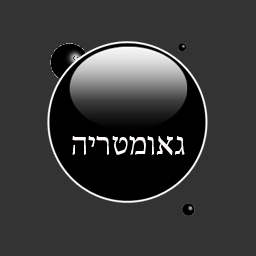
<style>
.page{position:relative;width:256px;height:256px;background:#333333}
.page>*{position:absolute;margin:0}
.t1{font:36px "AdobeHebrew-Regular";color:#fefafa}
</style>
<div class="page">
<p class="t1" style="left:72px;top:136px;width:113px;height:19px">הירטמואג</p>
</div>
